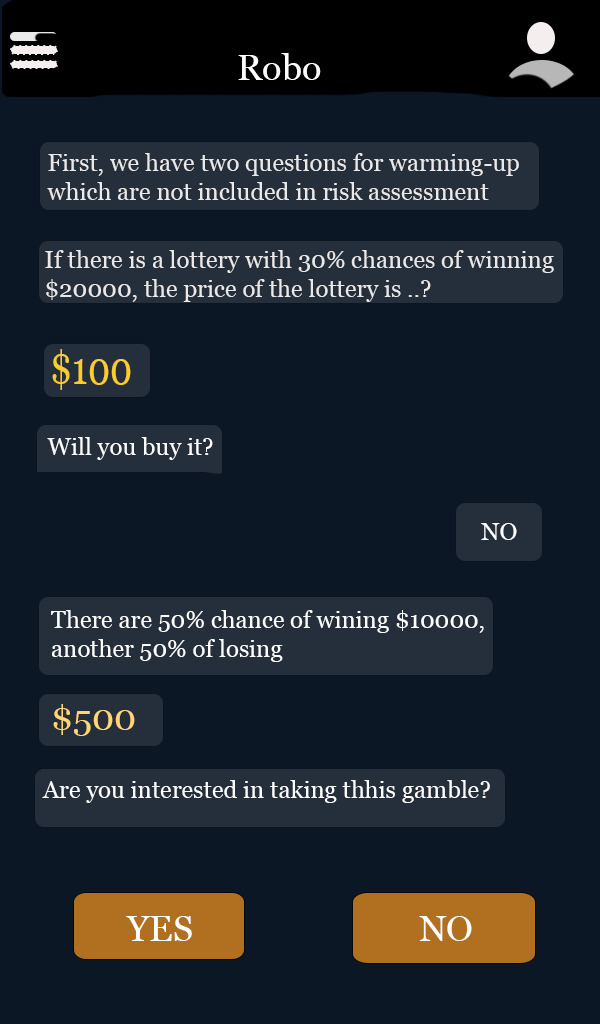
<style>
.page{position:relative;width:600px;height:1024px;background:#0c1726}
.page>*{position:absolute;margin:0}
.t1{font:36px "Georgia";color:#ffffff}
.t2{font:24px "Georgia";color:#e8e5e5}
.t3{font:46.1px "Georgia";color:#f9c616;scale:0.78 1}
.t4{font:24px "Georgia";color:#ffffff}
.t5{font:36px "Georgia";color:#ffd164}
</style>
<div class="page">
<p class="t1" style="left:238px;top:53px;width:83px;height:27px">Robo</p>
<p class="t2" style="left:47px;top:153px;width:472px;height:47px">First, we have two questions for warming-up <br>which are not included in risk assessment</p>
<p class="t2" style="left:45px;top:250px;width:509px;height:52px">If there is a lottery with 30% chances of winning <br>$20000, the price of the lottery is ..?</p>
<p class="t3" style="left:52px;top:349px;width:79px;height:41px">$100</p>
<p class="t4" style="left:47px;top:437px;width:166px;height:23px">Will you buy it?</p>
<p class="t4" style="left:481px;top:523px;width:36px;height:17px">NO</p>
<p class="t4" style="left:51px;top:610px;width:433px;height:52px">There are 50% chance of wining $10000,<br>another 50% of losing</p>
<p class="t5" style="left:53px;top:704px;width:82px;height:32px">$500</p>
<p class="t4" style="left:42px;top:780px;width:448px;height:23px">Are you interested in taking thhis gamble?</p>
<p class="t1" style="left:126px;top:916px;width:346px;height:25px">YES                          NO</p>
</div>
